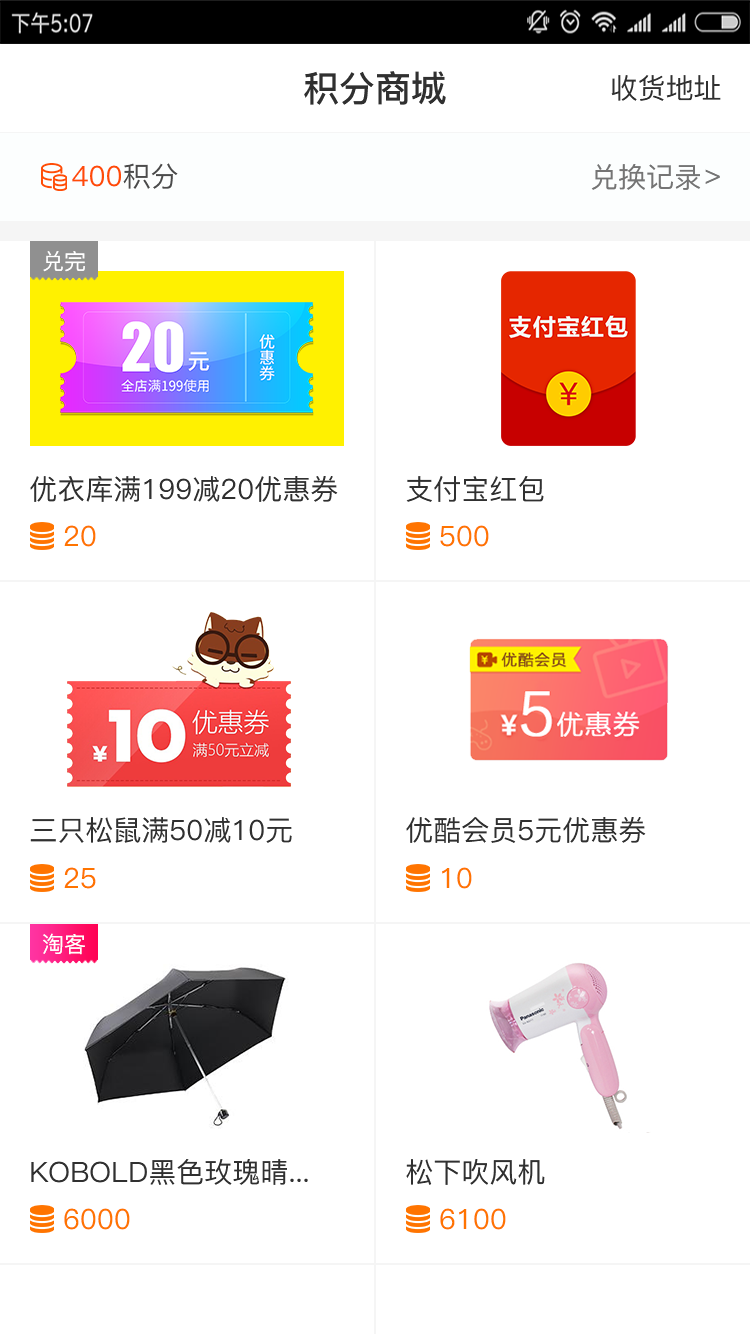
<style>
.page{position:relative;width:750px;height:1334px;background:#ffffff}
.page>*{position:absolute;margin:0}
.t1{font:36px "PingFang-SC-Bold";color:#303030}
.t2{font:28px "PingFang-SC-Medium";color:#303030}
.t3{font:28px "PingFang-SC-Medium";color:#ff4c06}
.t4{font:28px "PingFang-SC-Medium";color:#4b4b4b}
.t5{font:28px "PingFang-SC-Medium";color:#757575}
.t6{font:22px "PingFang-SC-Medium";color:#ffffff}
.t7{font:28px "PingFang-SC-Medium";color:#ff7400}
</style>
<div class="page">
<p class="t1" style="left:304px;top:71px;width:142px;height:34px">积分商城</p>
<p class="t2" style="left:611px;top:75px;width:110px;height:26px">收货地址</p>
<p class="t3" style="left:72px;top:163px;width:106px;height:26px">400<span class="t4">积分</span></p>
<p class="t5" style="left:591px;top:164px;width:110px;height:26px">兑换记录</p>
<p class="t5" style="left:705px;top:169px;width:15px;height:15px">&gt;</p>
<p class="t6" style="left:43px;top:251px;width:42px;height:21px">兑完</p>
<p class="t2" style="left:30px;top:476px;width:308px;height:26px">优衣库满199减20优惠券</p>
<p class="t2" style="left:406px;top:476px;width:138px;height:26px">支付宝红包</p>
<p class="t7" style="left:64px;top:525px;width:32px;height:22px">20</p>
<p class="t7" style="left:440px;top:525px;width:49px;height:22px">500</p>
<p class="t2" style="left:30px;top:817px;width:262px;height:26px">三只松鼠满50减10元</p>
<p class="t2" style="left:406px;top:817px;width:240px;height:26px">优酷会员5元优惠券</p>
<p class="t7" style="left:64px;top:867px;width:32px;height:22px">25</p>
<p class="t7" style="left:442px;top:867px;width:30px;height:22px">10</p>
<p class="t6" style="left:43px;top:933px;width:42px;height:22px">淘客</p>
<p class="t2" style="left:31px;top:1159px;width:277px;height:26px">KOBOLD黑色玫瑰晴...</p>
<p class="t2" style="left:406px;top:1159px;width:139px;height:26px">松下吹风机</p>
<p class="t7" style="left:64px;top:1208px;width:66px;height:22px">6000</p>
<p class="t7" style="left:440px;top:1208px;width:66px;height:22px">6100</p>
</div>
